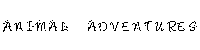
<style>
.page{position:relative;width:200px;height:50px;background:#ffffff}
.page>*{position:absolute;margin:0}
.t1{font:17px "KRButterfly";color:#000000}
</style>
<div class="page">
<p class="t1" style="left:2px;top:18px;width:196px;height:14px">animal adventures</p>
</div>
